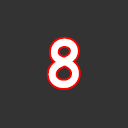
<style>
.page{position:relative;width:128px;height:128px;background:#333333}
.page>*{position:absolute;margin:0}
.t1{font:73.8px "ComicNeue-Bold";color:#ffffff;scale:0.97 1}
</style>
<div class="page">
<p class="t1" style="left:48px;top:38px;width:31px;height:50px">8</p>
</div>
